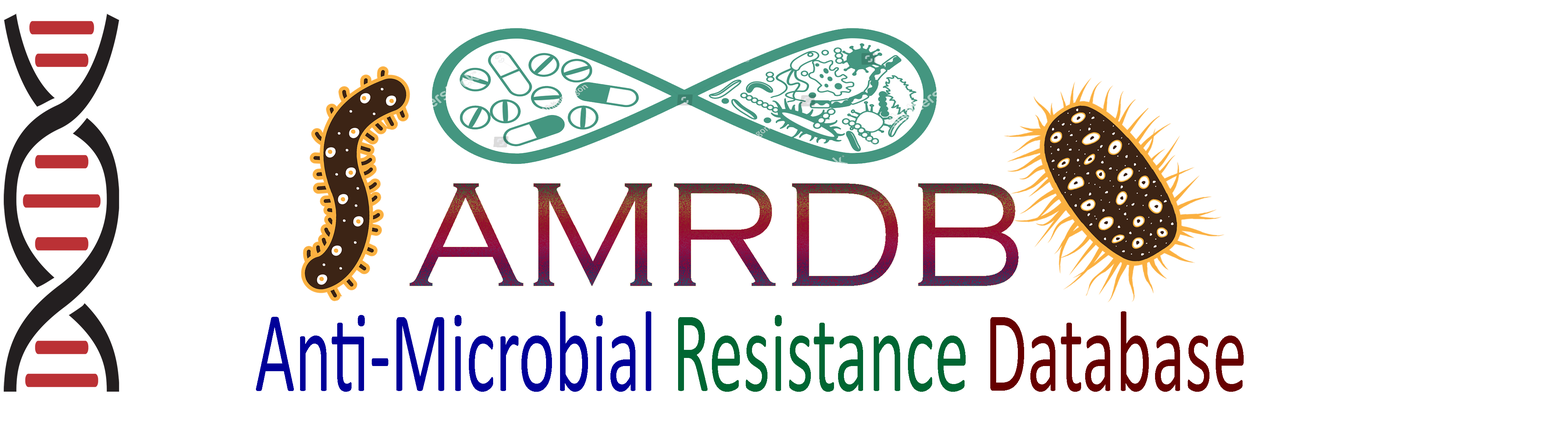
<style>
.page{position:relative;width:1568px;height:441px;background:#ffffff}
.page>*{position:absolute;margin:0}
.t1{font:153.2px "CopperplateGothic-Light"}
.t2{font:116.7px "Calibri";color:#000099;scale:0.59 1}
.t3{font:116.7px "Calibri";color:#006633;scale:0.59 1}
.t4{font:116.7px "Calibri";color:#660000;scale:0.59 1}
</style>
<div class="page">
<p class="t1" style="left:410px;top:183px;width:609px;height:103px">AMRDB</p>
<p class="t2" style="left:256px;top:311px;width:988px;height:81px">Anti-Microbial <span class="t3">Resistance </span><span class="t4">Database</span></p>
</div>
